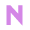
<style>
.page{position:relative;width:30px;height:30px;background:#ffffff}
.page>*{position:absolute;margin:0}
.t1{font:28px "Cassannet-Bold";color:#d487e6}
</style>
<div class="page">
<p class="t1" style="left:6px;top:5px;width:17px;height:21px">N</p>
</div>
